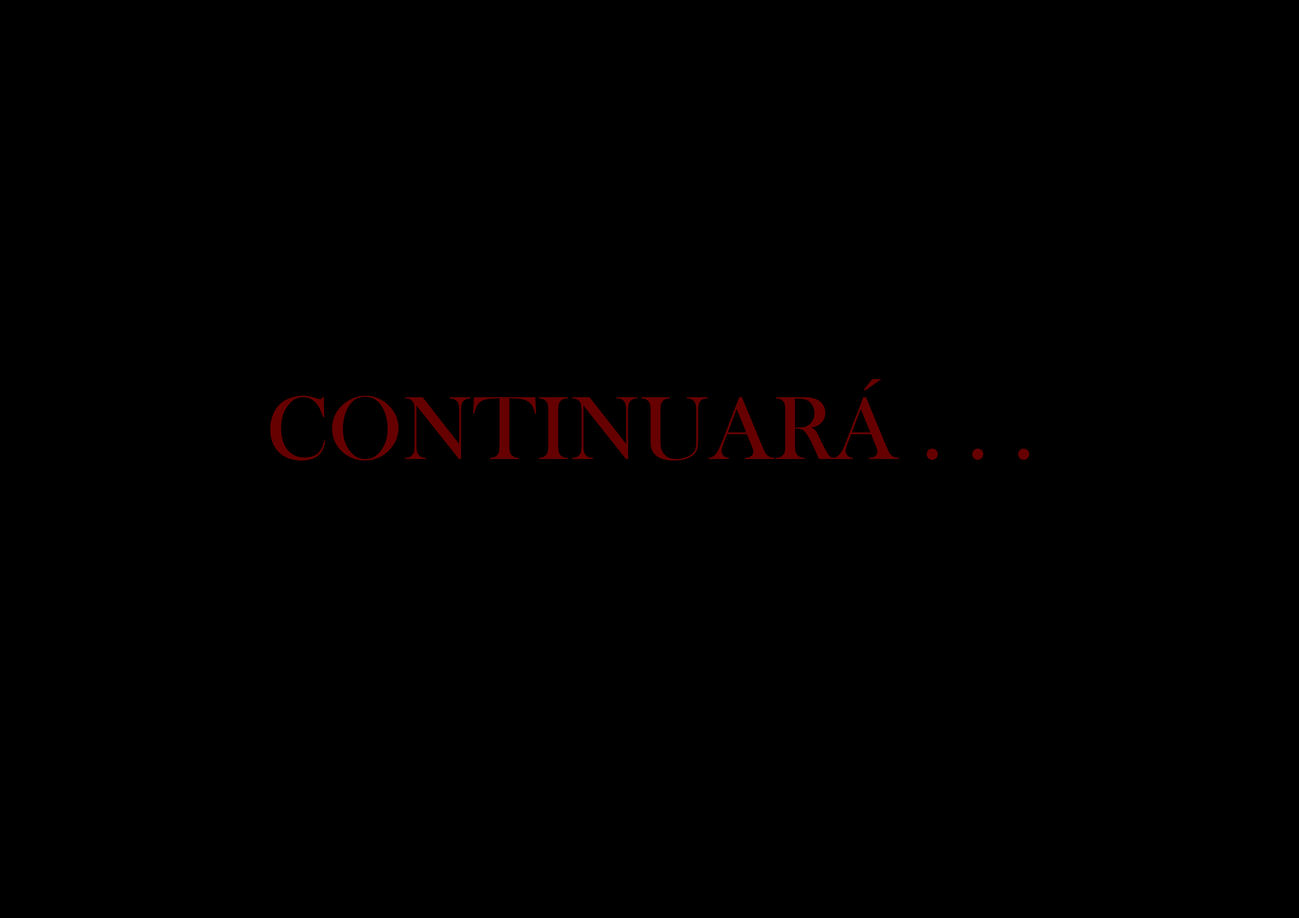
<style>
.page{position:relative;width:1299px;height:918px;background:#000000}
.page>*{position:absolute;margin:0}
.t1{font:92.6px "BaskOldFace";color:#660000}
</style>
<div class="page">
<p class="t1" style="left:270px;top:379px;width:759px;height:82px">CONTINUARÁ . . .</p>
</div>
